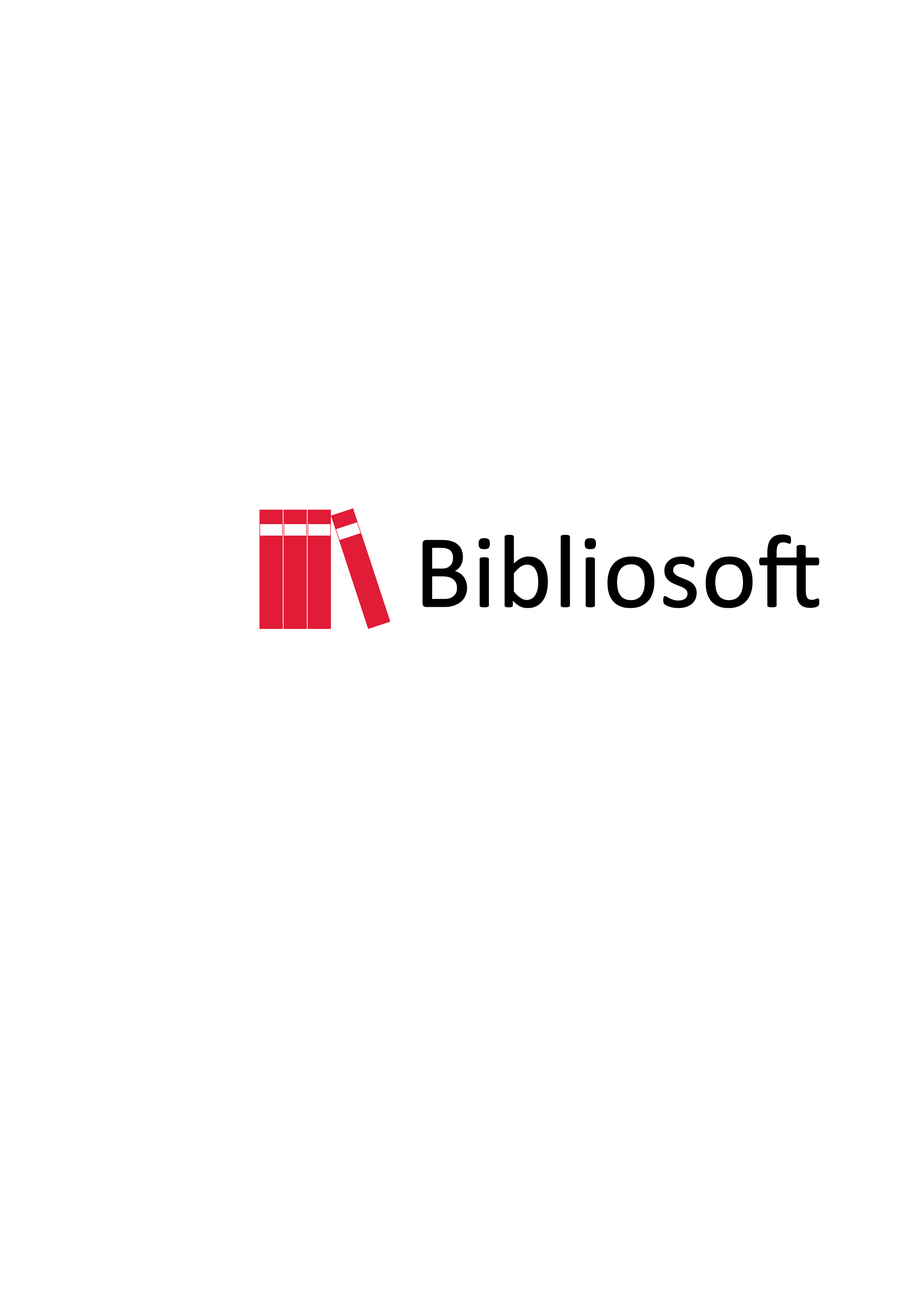
<style>
.page{position:relative;width:918px;height:1299px;background:#ffffff}
.page>*{position:absolute;margin:0}
.t1{font:104.9px "Calibri";letter-spacing:-0.018em;color:#000000;font-weight:bold}
</style>
<div class="page">
<p class="t1" style="left:422px;top:534px;width:398px;height:74px">Bibliosoft</p>
</div>
